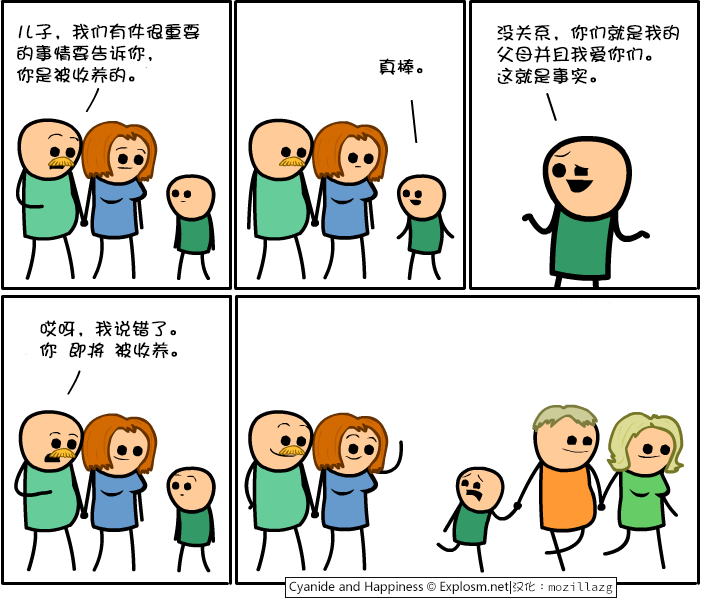
<style>
.page{position:relative;width:701px;height:598px;background:#ffffff}
.page>*{position:absolute;margin:0}
.t1{font:18px "DFShaoNvW5";color:#000000;font-weight:bold}
.t2{font:18px "DFShaoNvW5";color:#000000;font-weight:bold;font-style:italic}
</style>
<div class="page">
<p class="t1" style="left:17px;top:23px;width:183px;height:60px">儿子，我们有件很重要<br>的事情要告诉你，<br>你是被收养的。</p>
<p class="t1" style="left:497px;top:24px;width:182px;height:60px">没关系，你们就是我的<br>父母并且我爱你们。<br>这就是事实。</p>
<p class="t1" style="left:379px;top:58px;width:44px;height:17px">真棒。</p>
<p class="t1" style="left:40px;top:320px;width:137px;height:39px">哎呀，我说错了。<br>你 <span class="t2">即将 </span>被收养。</p>
</div>
